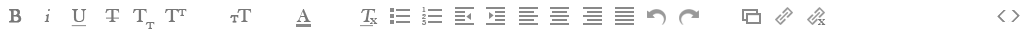
<style>
.page{position:relative;width:1024px;height:32px;background:#ffffff}
.page>*{position:absolute;margin:0}
.t1{font:19.3px "BaskOldFace";color:#777777;font-weight:bold}
.t2{font:19.3px "BaskOldFace";color:#777777;font-style:italic}
.t3{font:19.3px "BaskOldFace";color:#777777;text-decoration:underline}
.t4{font:19.3px "BaskOldFace";color:#777777}
.t5{font:10px "BaskOldFace";color:#777777;font-weight:bold}
.t6{font:19.3px "BaskOldFace";color:#777777;font-style:italic;text-decoration:underline}
.t7{font:8.2px "BaskOldFace";color:#898989}
.t8{font:14.6px "BaskOldFace";color:#777777;scale:1.08 1}
</style>
<div class="page">
<p class="t1" style="left:9px;top:9px;width:13px;height:14px">B</p>
<p class="t2" style="left:44px;top:9px;width:6px;height:13px">i</p>
<p class="t3" style="left:71px;top:9px;width:16px;height:18px">U</p>
<p class="t4" style="left:105px;top:9px;width:15px;height:13px">T</p>
<p class="t4" style="left:133px;top:9px;width:22px;height:20px">TT</p>
<p class="t4" style="left:165px;top:9px;width:22px;height:13px">TT</p>
<p class="t5" style="left:230px;top:9px;width:22px;height:14px">T<span class="t4">T</span></p>
<p class="t4" style="left:296px;top:9px;width:15px;height:13px">A</p>
<p class="t6" style="left:360px;top:9px;width:16px;height:18px">T</p>
<p class="t7" style="left:422px;top:7px;width:4px;height:5px">1</p>
<p class="t7" style="left:422px;top:14px;width:4px;height:5px">2</p>
<p class="t8" style="left:370px;top:18px;width:8px;height:6px">x</p>
<p class="t7" style="left:422px;top:20px;width:5px;height:5px">3</p>
<p class="t8" style="left:818px;top:19px;width:8px;height:6px">x</p>
</div>
